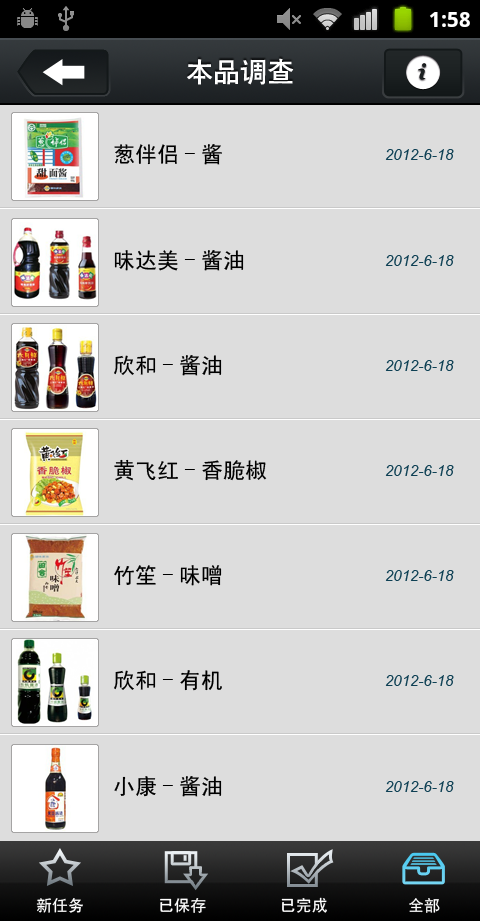
<style>
.page{position:relative;width:480px;height:921px;background:#dddddd}
.page>*{position:absolute;margin:0}
.t1{font:27px "CTCuHeiSJ";color:#ffffff}
.t2{font:22px "SimHei";color:#000000}
.t3{font:15px "Arial-ItalicMT";color:#0e4054}
.t4{font:16px "SimHei";color:#ffffff}
</style>
<div class="page">
<p class="t1" style="left:187px;top:58px;width:107px;height:27px">本品调查</p>
<p class="t2" style="left:114px;top:144px;width:108px;height:21px">葱伴侣-酱</p>
<p class="t3" style="left:385px;top:149px;width:69px;height:11px">2012-6-18</p>
<p class="t2" style="left:114px;top:250px;width:130px;height:21px">味达美-酱油</p>
<p class="t3" style="left:385px;top:255px;width:69px;height:11px">2012-6-18</p>
<p class="t2" style="left:114px;top:355px;width:108px;height:21px">欣和-酱油</p>
<p class="t3" style="left:385px;top:360px;width:69px;height:11px">2012-6-18</p>
<p class="t2" style="left:114px;top:459px;width:153px;height:22px">黄飞红-香脆椒</p>
<p class="t3" style="left:385px;top:465px;width:69px;height:11px">2012-6-18</p>
<p class="t2" style="left:114px;top:565px;width:108px;height:21px">竹笙-味噌</p>
<p class="t3" style="left:385px;top:570px;width:69px;height:11px">2012-6-18</p>
<p class="t2" style="left:114px;top:670px;width:108px;height:21px">欣和-有机</p>
<p class="t3" style="left:385px;top:675px;width:69px;height:11px">2012-6-18</p>
<p class="t2" style="left:114px;top:776px;width:108px;height:21px">小康-酱油</p>
<p class="t3" style="left:385px;top:781px;width:69px;height:11px">2012-6-18</p>
<p class="t4" style="left:36px;top:898px;width:47px;height:15px">新任务</p>
<p class="t4" style="left:160px;top:898px;width:46px;height:15px">已保存</p>
<p class="t4" style="left:281px;top:897px;width:46px;height:16px">已完成</p>
<p class="t4" style="left:409px;top:898px;width:31px;height:15px">全部</p>
</div>
